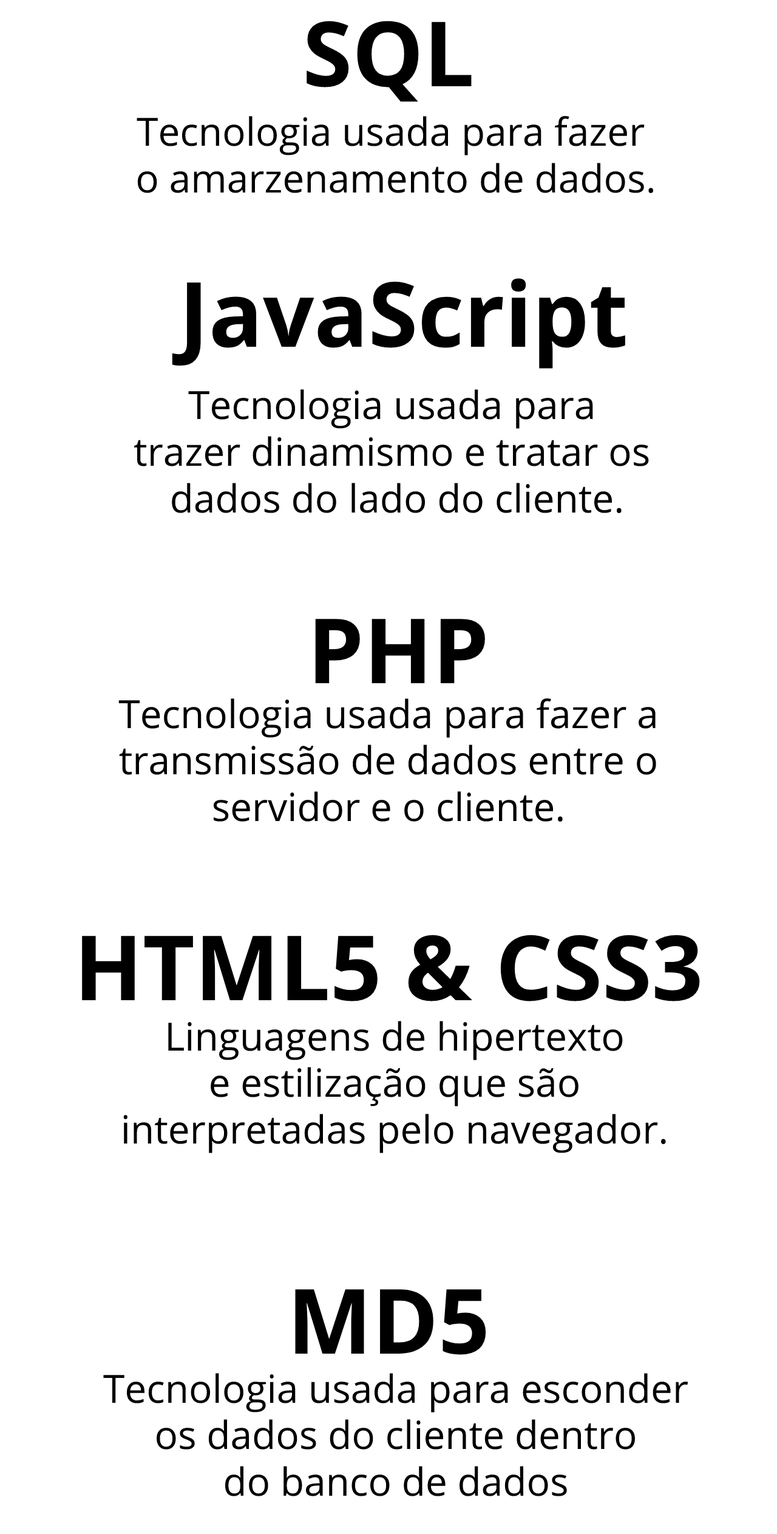
<style>
.page{position:relative;width:777px;height:1534px;background:#ffffff}
.page>*{position:absolute;margin:0}
.t1{font:89.9px "OpenSans-Bold";color:#000000}
.t2{font:38.9px "OpenSans-Regular";color:#000000}
</style>
<div class="page">
<p class="t1" style="left:307px;top:21px;width:165px;height:81px">SQL</p>
<p class="t2" style="left:137px;top:116px;width:516px;height:77px;text-align:center">Tecnologia usada para fazer <br>o amarzenamento de dados.</p>
<p class="t1" style="left:172px;top:278px;width:454px;height:91px">JavaScript</p>
<p class="t2" style="left:134px;top:389px;width:515px;height:124px;text-align:center">Tecnologia usada para <br>trazer dinamismo e tratar os <br>dados do lado do cliente.</p>
<p class="t1" style="left:315px;top:619px;width:170px;height:64px">PHP</p>
<p class="t2" style="left:118px;top:698px;width:538px;height:124px;text-align:center">Tecnologia usada para fazer a<br>transmissão de dados entre o<br>servidor e o cliente.</p>
<p class="t1" style="left:82px;top:935px;width:618px;height:66px">HTML5 &amp; CSS3</p>
<p class="t2" style="left:123px;top:1021px;width:543px;height:132px;text-align:center">Linguagens de hipertexto<br>e estilização que são<br>interpretadas pelo navegador.</p>
<p class="t1" style="left:295px;top:1289px;width:191px;height:66px">MD5</p>
<p class="t2" style="left:103px;top:1373px;width:586px;height:123px;text-align:center">Tecnologia usada para esconder<br>os dados do cliente dentro<br>do banco de dados</p>
</div>
